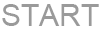
<style>
.page{position:relative;width:100px;height:30px;background:#ffffff}
.page>*{position:absolute;margin:0}
.t1{font:30px "ArialMT";color:#9a9a9a}
</style>
<div class="page">
<p class="t1" style="left:2px;top:4px;width:97px;height:22px">START</p>
</div>
